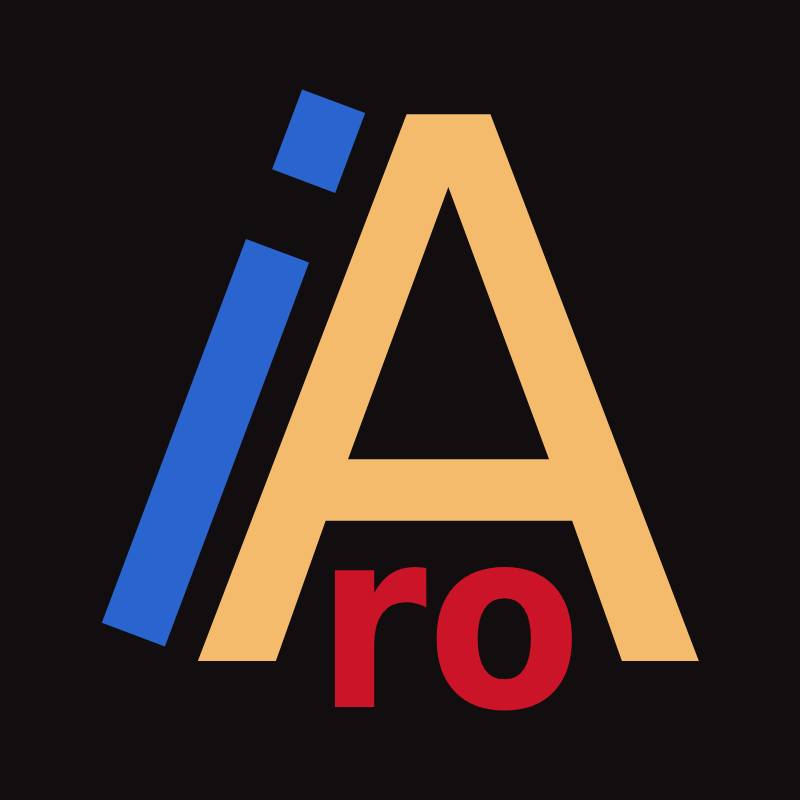
<style>
.page{position:relative;width:800px;height:800px;background:#120e0f}
.page>*{position:absolute;margin:0}
.t1{font:750px "DejaVuSans";color:#2a64cf}
.t2{font:750px "DejaVuSans";color:#f3bb6b}
.t3{font:250px "DejaVuSansCondensed-Bold";color:#cb1427}
</style>
<div class="page">
<p class="t1" style="left:101px;top:89px;width:265px;height:558px;rotate:21deg">i</p>
<p class="t2" style="left:197px;top:114px;width:502px;height:547px">A</p>
<p class="t3" style="left:334px;top:566px;width:238px;height:145px">ro</p>
</div>
